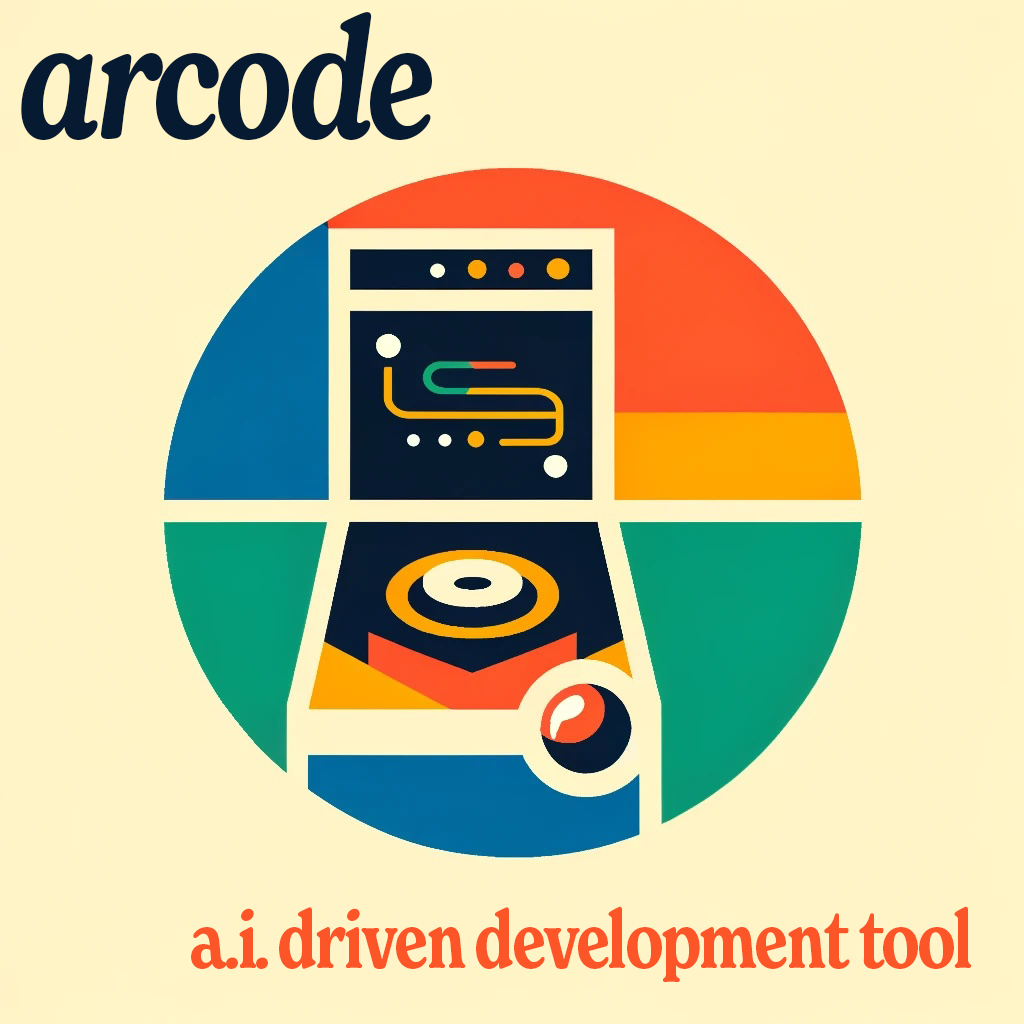
<style>
.page{position:relative;width:1024px;height:1024px;background:#fff4c7}
.page>*{position:absolute;margin:0}
.t1{font:166px "NewSpirit-SemiBoldCondensedItalic";letter-spacing:-0.035em;color:#061a32}
.t2{font:80px "NewSpirit-SemiBoldCondensed";letter-spacing:-0.035em;color:#fc5528}
</style>
<div class="page">
<p class="t1" style="left:21px;top:12px;width:411px;height:128px">arcode</p>
<p class="t2" style="left:191px;top:906px;width:781px;height:76px">a.i. driven development tool</p>
</div>
